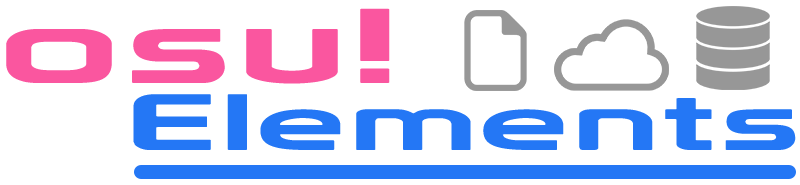
<style>
.page{position:relative;width:800px;height:185px;background:#ffffff}
.page>*{position:absolute;margin:0}
.t1{font:103.4px "Prototype";letter-spacing:0.03em;color:#fa569f;scale:2 1}
.t2{font:77.5px "Prototype";letter-spacing:0.03em;color:#2477f5;scale:2 1}
</style>
<div class="page">
<p class="t1" style="left:6px;top:8px;width:384px;height:76px">osu!</p>
<p class="t2" style="left:133px;top:94px;width:663px;height:56px">Elements</p>
</div>
